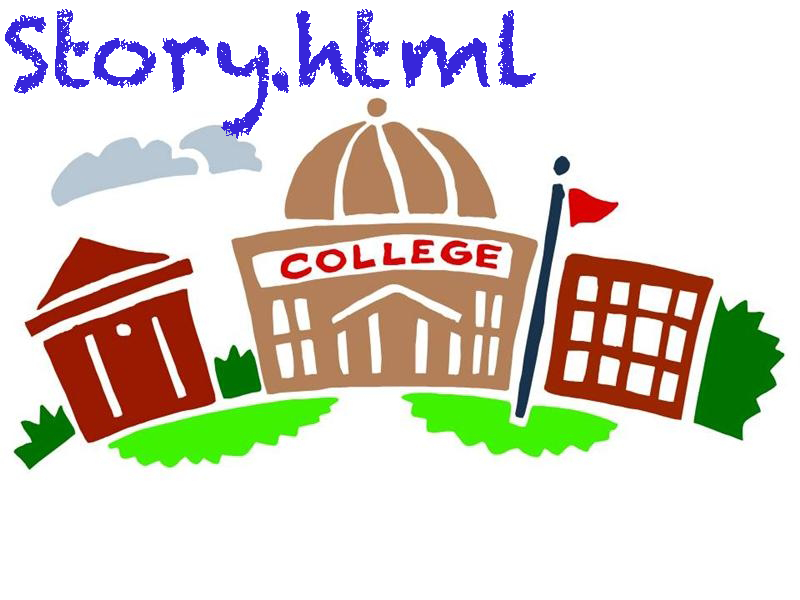
<style>
.page{position:relative;width:800px;height:600px;background:#ffffff}
.page>*{position:absolute;margin:0}
.t1{font:96px "Chalkduster";color:#3726da}
</style>
<div class="page">
<p class="t1" style="left:5px;top:9px;width:531px;height:130px">Story.html</p>
</div>
